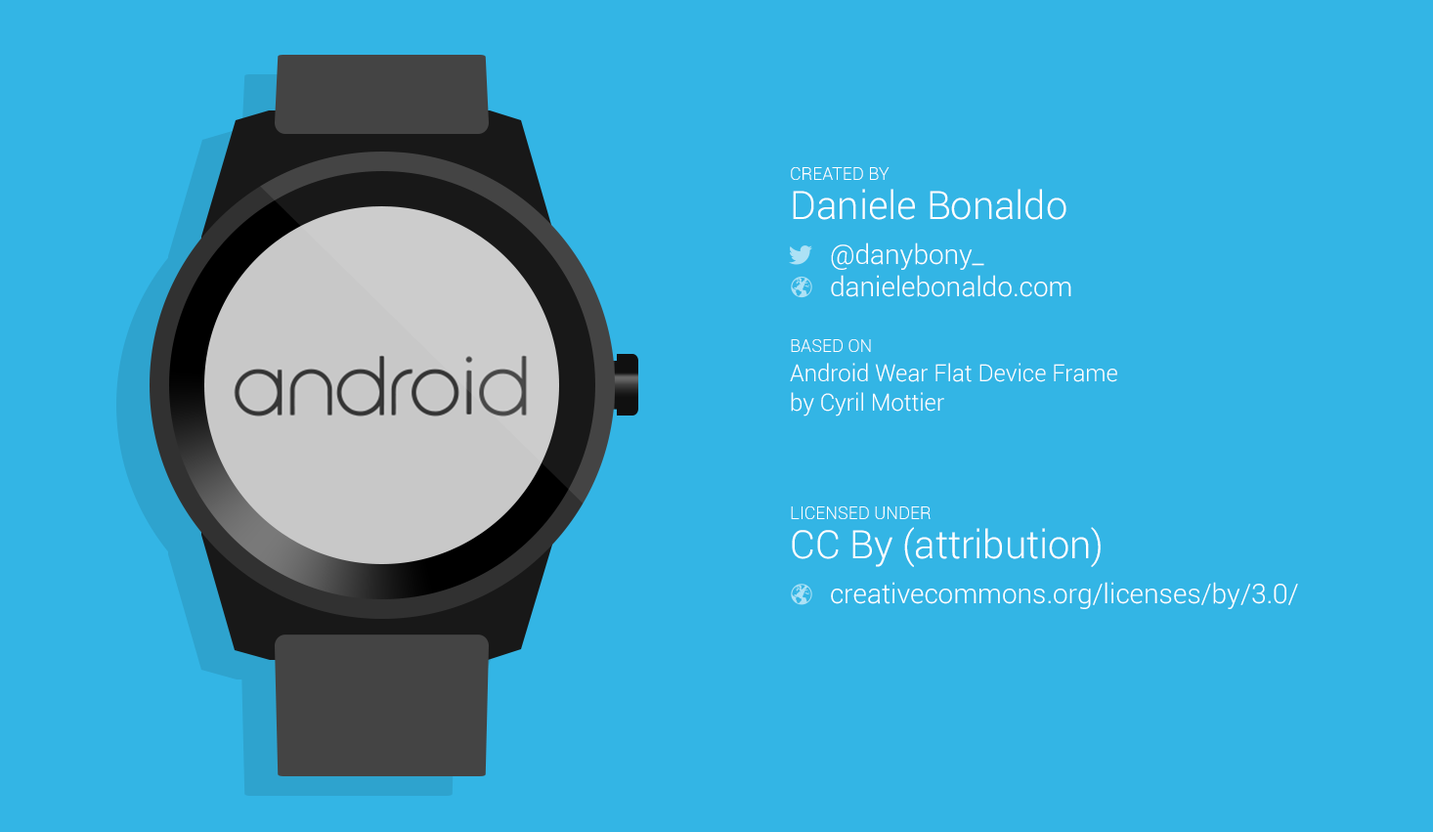
<style>
.page{position:relative;width:1433px;height:832px;background:#33b5e5}
.page>*{position:absolute;margin:0}
.t1{font:27.4px "Roboto-Light";color:#ffffff}
.t2{font:17.6px/39.2px "Roboto-Light";color:#ffffff}
.t3{font:39.2px/39.2px "Roboto-Light";color:#ffffff}
.t4{font:23.5px/29.3px "Roboto-Light";color:#ffffff}
</style>
<div class="page">
<p class="t1" style="left:791px;top:167px;width:281px;height:130px"><span class="t2">CREATED BY<br></span><span class="t3">Daniele Bonaldo<br> <br></span>      @danybony_<br>      danielebonaldo.com</p>
<p class="t4" style="left:790px;top:339px;width:327px;height:77px"><span class="t2">BASED ON<br></span>Android Wear Flat Device Frame<br>by Cyril Mottier</p>
<p class="t1" style="left:791px;top:506px;width:507px;height:103px"><span class="t2">LICENSED UNDER<br></span><span class="t3">CC By (attribution)<br> <br>      </span>creativecommons.org/licenses/by/3.0/</p>
</div>
